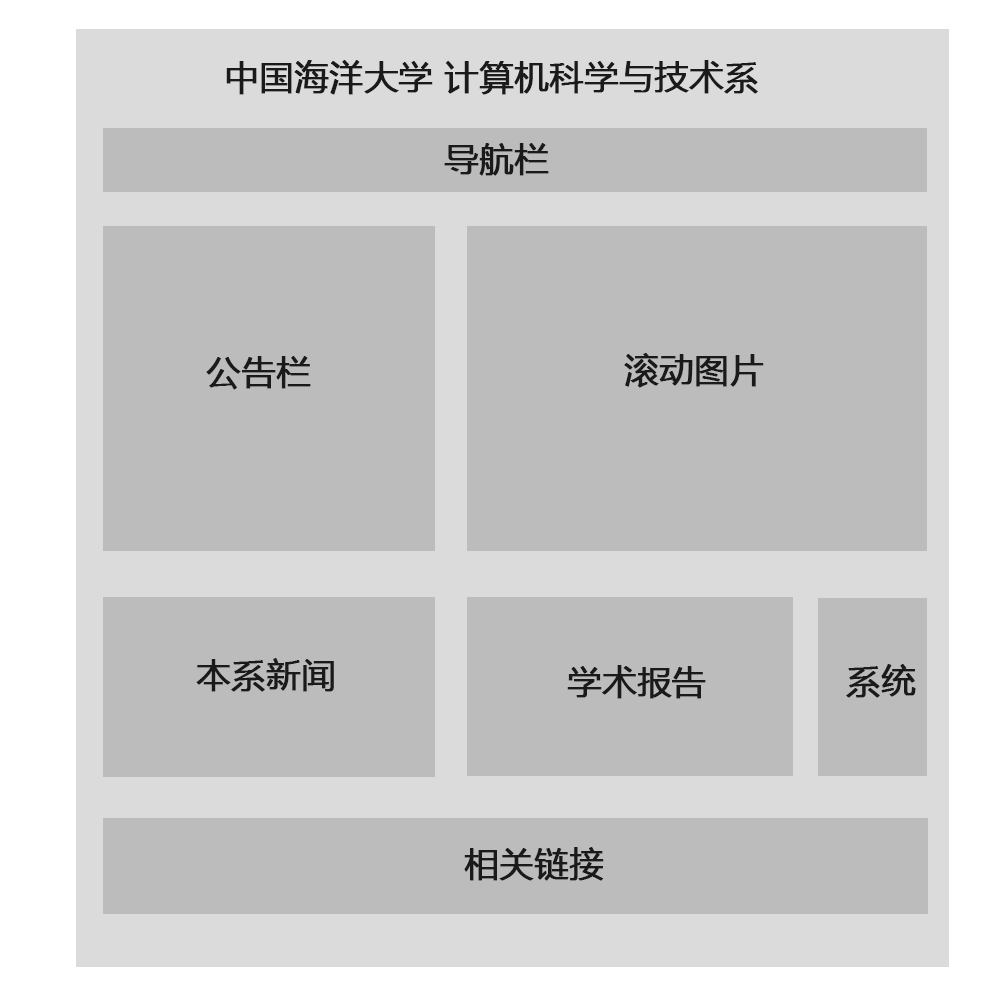
<style>
.page{position:relative;width:1000px;height:1000px;background:#bcbcbc}
.page>*{position:absolute;margin:0}
.t1{font:34px "MicrosoftYaHei";color:#1a1a1a;font-weight:bold}
</style>
<div class="page">
<p class="t1" style="left:226px;top:60px;width:532px;height:35px">中国海洋大学 计算机科学与技术系</p>
<p class="t1" style="left:444px;top:143px;width:105px;height:33px">导航栏</p>
<p class="t1" style="left:624px;top:353px;width:140px;height:35px">滚动图片</p>
<p class="t1" style="left:206px;top:356px;width:105px;height:34px">公告栏</p>
<p class="t1" style="left:196px;top:658px;width:138px;height:34px">本系新闻</p>
<p class="t1" style="left:567px;top:665px;width:139px;height:34px">学术报告</p>
<p class="t1" style="left:846px;top:664px;width:70px;height:34px">系统</p>
<p class="t1" style="left:464px;top:847px;width:140px;height:34px">相关链接</p>
</div>
